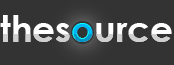
<style>
.page{position:relative;width:174px;height:65px;background:#333333}
.page>*{position:absolute;margin:0}
.t1{font:36px "CenturyGothic-Bold";color:#ffffff}
.t2{font:36px "CenturyGothic-Bold";color:#00b7f3}
</style>
<div class="page">
<p class="t1" style="left:0px;top:15px;width:172px;height:27px">thes<span class="t2">o</span>urce</p>
</div>
